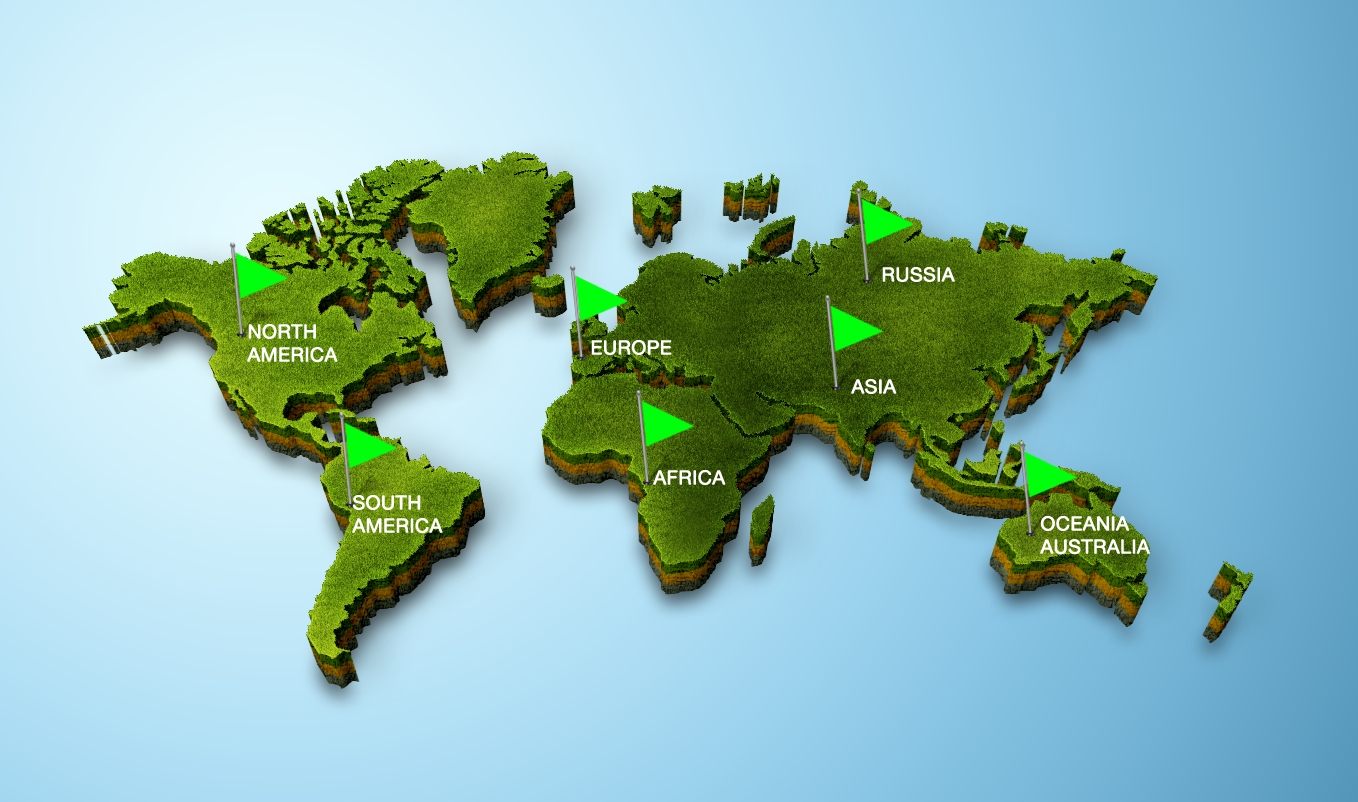
<style>
.page{position:relative;width:1358px;height:802px}
.page>*{position:absolute;margin:0}
.t1{font:19.3px "AlteHaasGrotesk";color:#ffffff;text-transform:uppercase;font-weight:bold}
</style>
<div class="page">
<p class="t1" style="left:882px;top:267px;width:73px;height:15px">russia</p>
<p class="t1" style="left:247px;top:324px;width:91px;height:39px">north<br>America</p>
<p class="t1" style="left:591px;top:340px;width:81px;height:15px">europe</p>
<p class="t1" style="left:851px;top:379px;width:46px;height:15px">Asia</p>
<p class="t1" style="left:653px;top:470px;width:73px;height:15px">Africa</p>
<p class="t1" style="left:352px;top:495px;width:91px;height:39px">South<br>America</p>
<p class="t1" style="left:1040px;top:516px;width:110px;height:39px">oceania<br>australia</p>
</div>
